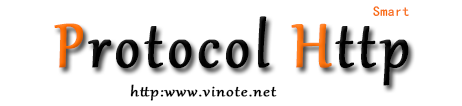
<style>
.page{position:relative;width:462px;height:106px;background:#ffffff}
.page>*{position:absolute;margin:0}
.t1{font:13.7px "¿¬Ìå";letter-spacing:0.04em;color:#f86a02}
.t2{font:75px "Gabriola";letter-spacing:0.06em;color:#000000;font-weight:bold;scale:0.91 1}
.t3{font:75px "Gabriola";letter-spacing:0.06em;color:#ff6d02;font-weight:bold;scale:0.91 1}
.t4{font:75px "Gabriola";letter-spacing:0.06em;color:#ff730d;font-weight:bold;scale:0.91 1}
.t5{font:16.9px "Gabriola";letter-spacing:0.04em;color:#000000;font-weight:bold;scale:1.19 1}
</style>
<div class="page">
<p class="t1" style="left:373px;top:6px;width:36px;height:10px">Smart</p>
<p class="t2" style="left:54px;top:16px;width:355px;height:70px"><span class="t3">P</span>rotocol <span class="t4">H</span>ttp</p>
<p class="t5" style="left:130px;top:84px;width:147px;height:17px">http:www.vinote.net</p>
</div>
